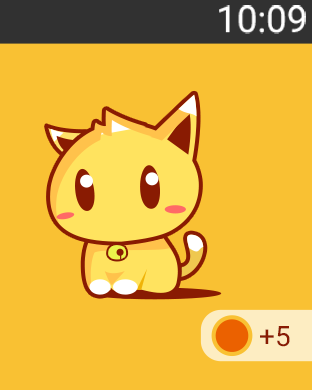
<style>
.page{position:relative;width:312px;height:390px;background:#f9c133}
.page>*{position:absolute;margin:0}
.t1{font:36.7px "Roboto-Regular";color:#ffffff}
.t2{font:28px "Roboto-Regular";color:#891b02}
</style>
<div class="page">
<p class="t1" style="left:219px;top:5px;width:87px;height:29px">10:09</p>
<p class="t2" style="left:260px;top:326px;width:30px;height:21px">+5</p>
</div>
